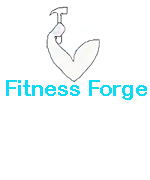
<style>
.page{position:relative;width:150px;height:180px;background:#ffffff}
.page>*{position:absolute;margin:0}
.t1{font:22px "ArialRoundedMTBold";color:#0ddbf6}
</style>
<div class="page">
<p class="t1" style="left:6px;top:80px;width:141px;height:20px">Fitness Forge</p>
</div>
